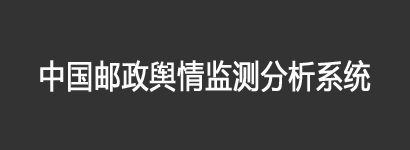
<style>
.page{position:relative;width:410px;height:150px;background:#333333}
.page>*{position:absolute;margin:0}
.t1{font:32px "MicrosoftYaHeiUI";letter-spacing:0.03em;color:#fcfcfd;font-weight:bold;scale:0.82 1}
</style>
<div class="page">
<p class="t1" style="left:40px;top:60px;width:331px;height:32px">中国邮政舆情监测分析系统</p>
</div>
